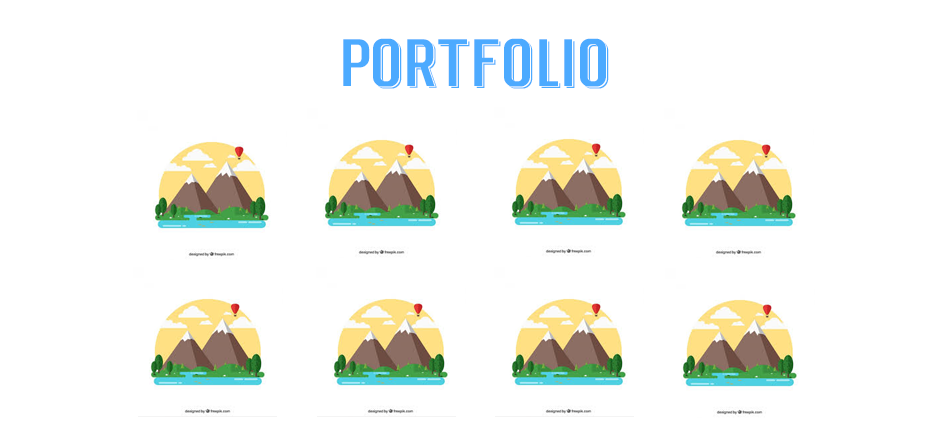
<style>
.page{position:relative;width:938px;height:437px;background:#ffffff}
.page>*{position:absolute;margin:0}
.t1{font:66.7px "Grounday";color:#4caaff}
</style>
<div class="page">
<p class="t1" style="left:343px;top:38px;width:266px;height:51px">Portfolio</p>
</div>
